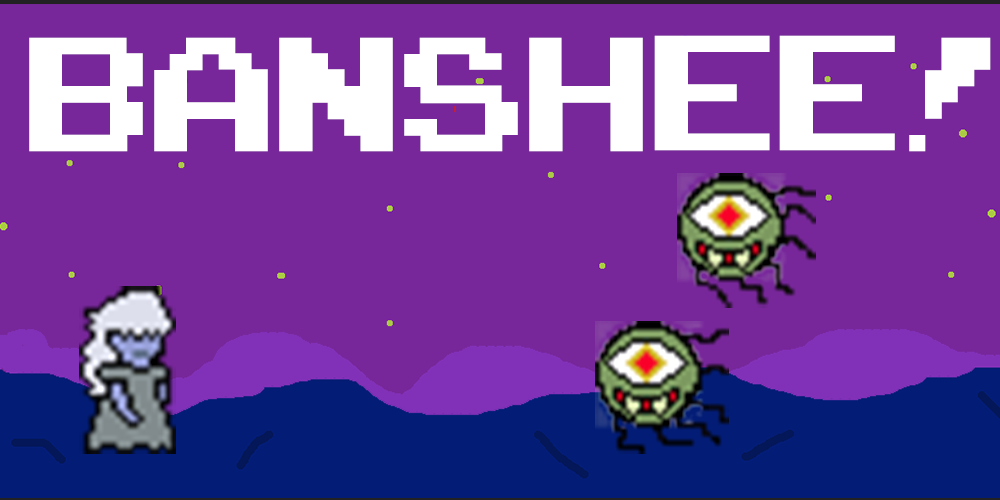
<style>
.page{position:relative;width:1000px;height:500px;background:#78279b}
.page>*{position:absolute;margin:0}
.t1{font:227.3px "ArcadeClassic";color:#ffffff}
</style>
<div class="page">
<p class="t1" style="left:29px;top:35px;width:962px;height:117px">BANSHEE!</p>
</div>
